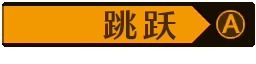
<style>
.page{position:relative;width:256px;height:64px;background:#f29800}
.page>*{position:absolute;margin:0}
.t1{font:32px "SkipStd-B";letter-spacing:0.125em;color:#4c2b02;scale:1.1 1}
.t2{font:32px "FZYASHS_ZHONG--GB1-0";letter-spacing:0.125em;color:#4c2b02;scale:1.1 1}
</style>
<div class="page">
<p class="t1" style="left:103px;top:10px;width:73px;height:31px">跳<span class="t2">跃</span></p>
</div>
